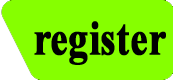
<style>
.page{position:relative;width:173px;height:80px;background:#86ff00}
.page>*{position:absolute;margin:0}
.t1{font:48px "TimesNewRomanPS-BoldMT";color:#000000;font-weight:bold;scale:0.8 1}
</style>
<div class="page">
<p class="t1" style="left:34px;top:21px;width:132px;height:44px">register</p>
</div>
